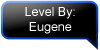
<style>
.page{position:relative;width:100px;height:50px;background:#000000}
.page>*{position:absolute;margin:0}
.t1{font:12.5px "ArialMT";color:#ffffff}
</style>
<div class="page">
<p class="t1" style="left:25px;top:7px;width:50px;height:27px;text-align:center">Level By: <br>Eugene</p>
</div>
